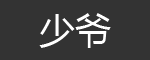
<style>
.page{position:relative;width:150px;height:60px;background:#333333}
.page>*{position:absolute;margin:0}
.t1{font:36px "MicrosoftYaHei";color:#ffffff}
</style>
<div class="page">
<p class="t1" style="left:39px;top:13px;width:72px;height:35px">少爷</p>
</div>
